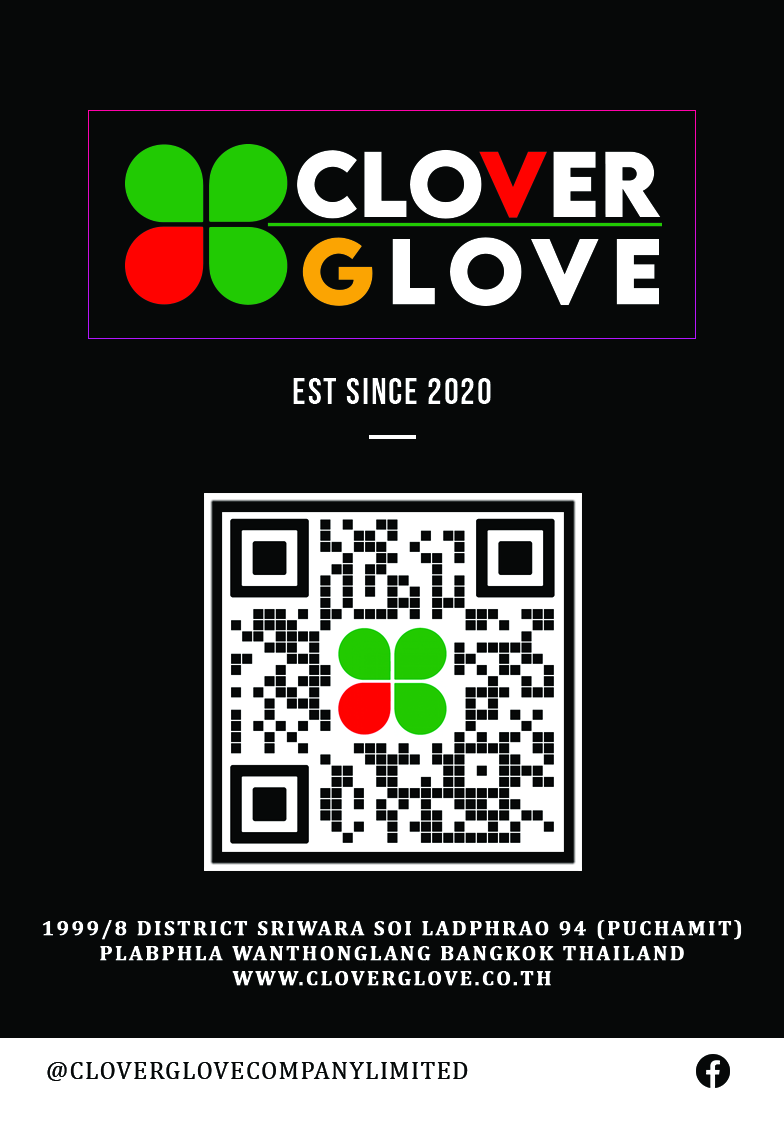
<style>
.page{position:relative;width:784px;height:1138px;background:#060808}
.page>*{position:absolute;margin:0}
.t1{font:36.7px "BebasNeue-Regular";letter-spacing:0.05em;color:#ffffff}
.t2{font:62.4px "BebasNeue-Regular";letter-spacing:0.05em;color:#ffffff}
.t3{font:20.8px "Cambria-Bold";letter-spacing:0.1em;color:#ffffff;font-weight:bold}
.t4{font:25.1px "Cambria";letter-spacing:0.05em;color:#060808}
</style>
<div class="page">
<p class="t1" style="left:293px;top:378px;width:198px;height:26px"><span class="t2">  <br></span>EST SINCE 2020</p>
<p class="t3" style="left:42px;top:920px;width:700px;height:66px;text-align:center">1999/8 DISTRICT SRIWARA SOI LADPHRAO 94 (PUCHAMIT)<br>PLABPHLA WANTHONGLANG BANGKOK THAILAND<br>WWW.CLOVERGLOVE.CO.TH</p>
<p class="t4" style="left:47px;top:1062px;width:421px;height:19px">@CLOVERGLOVECOMPANYLIMITED</p>
</div>
